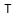
<style>
.page{position:relative;width:16px;height:16px;background:#ffffff}
.page>*{position:absolute;margin:0}
.t1{font:14px "Consolas";color:#000000}
</style>
<div class="page">
<p class="t1" style="left:4px;top:4px;width:8px;height:9px">T</p>
</div>
